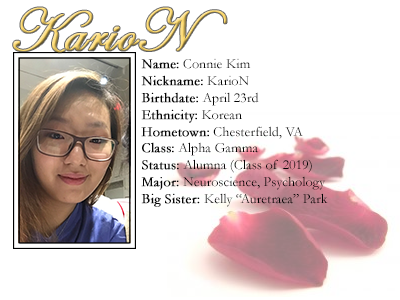
<style>
.page{position:relative;width:400px;height:300px;background:#ffffff}
.page>*{position:absolute;margin:0}
.t1{font:60px "EdwardianScriptITC";font-weight:bold}
.t2{font:14px "Garamond";color:#000000}
.t3{font:14px "Garamond";color:#000000;font-weight:bold}
</style>
<div class="page">
<p class="t1" style="left:13px;top:7px;width:214px;height:46px">KarioN</p>
<p class="t2" style="left:141px;top:58px;width:187px;height:149px"><span class="t3">Name:</span> Connie Kim<br><span class="t3">Nickname:</span> KarioN<br><span class="t3">Birthdate:</span> April 23rd<br><span class="t3">Ethnicity:</span> Korean<br><span class="t3">Hometown:</span> Chesterfield, VA<br><span class="t3">Class:</span> Alpha Gamma<br><span class="t3">Status:</span> Alumna (Class of 2019)<br><span class="t3">Major:</span> Neuroscience, Psychology<br><span class="t3">Big Sister: </span>Kelly “Auretraea” Park</p>
</div>
